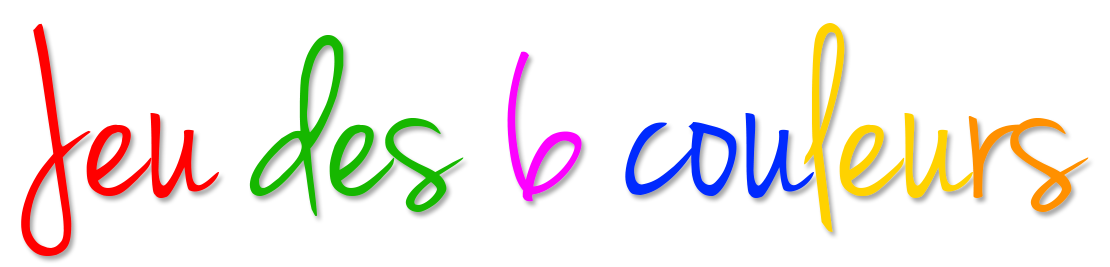
<style>
.page{position:relative;width:1110px;height:267px;background:#ffffff}
.page>*{position:absolute;margin:0}
.t1{font:250px "JennaSue";color:#ff0000}
.t2{font:250px "JennaSue";color:#16b700}
.t3{font:250px "JennaSue";color:#fc01ff}
.t4{font:250px "JennaSue";color:#002afe}
.t5{font:250px "JennaSue";color:#ffd200}
.t6{font:250px "JennaSue";color:#ff9000}
</style>
<div class="page">
<p class="t1" style="left:21px;top:23px;width:1068px;height:233px">Jeu <span class="t2">des </span><span class="t3">6 </span><span class="t4">cou</span><span class="t5">leu</span><span class="t6">rs</span></p>
</div>
